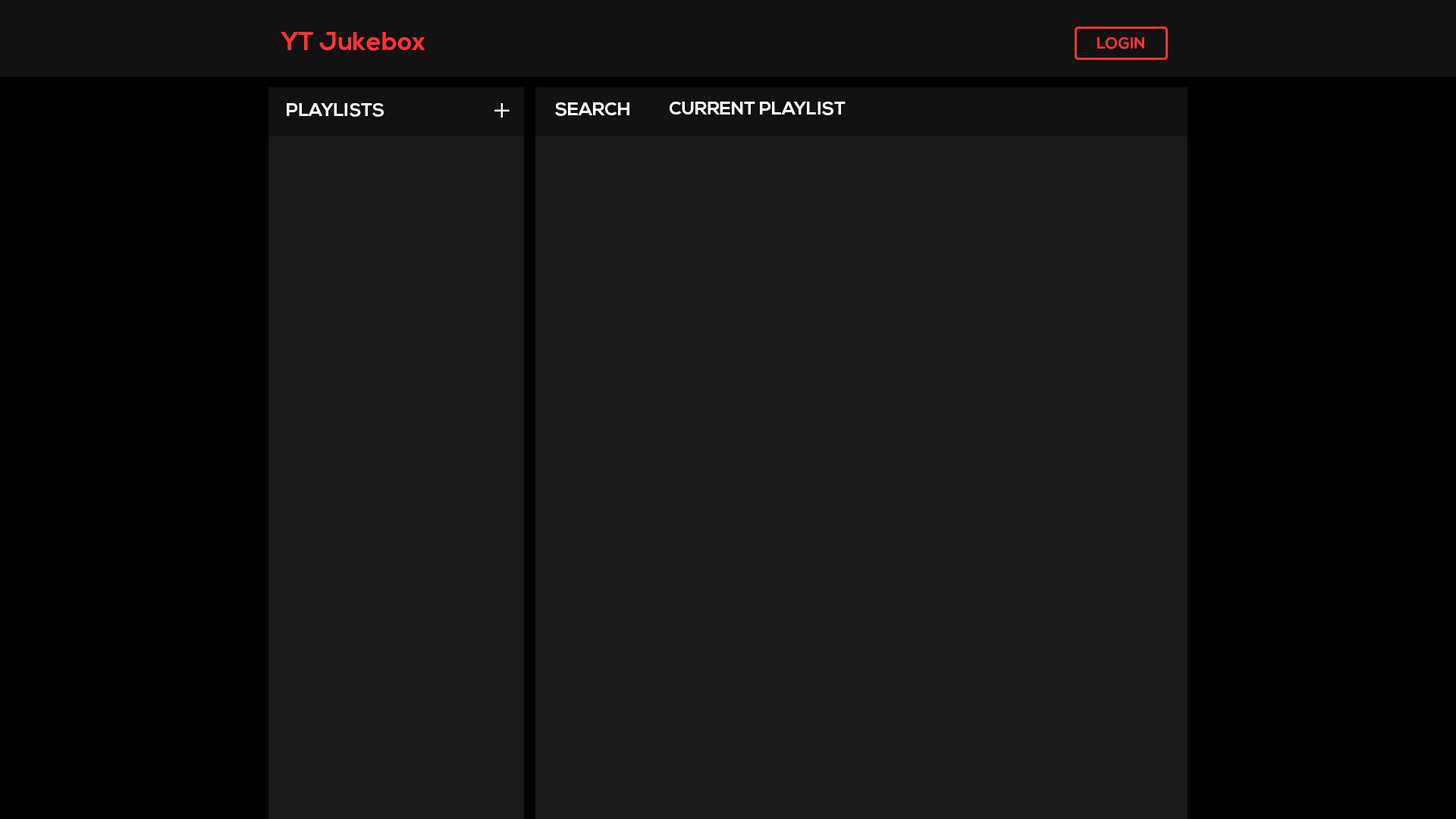
<style>
.page{position:relative;width:1456px;height:819px;background:#1a1a1a}
.page>*{position:absolute;margin:0}
.t1{font:25.8px "NexaBold";color:#ff3334}
.t2{font:16px "NexaBold";color:#ff3334}
.t3{font:18.2px "NexaBold";color:#ffffff}
.t4{font:36.4px "NexaLight";color:#ffffff}
</style>
<div class="page">
<p class="t1" style="left:281px;top:32px;width:144px;height:19px">YT Jukebox</p>
<p class="t2" style="left:1097px;top:37px;width:47px;height:12px">LOGIN</p>
<p class="t3" style="left:670px;top:102px;width:176px;height:13px">CURRENT PLAYLIST</p>
<p class="t3" style="left:287px;top:103px;width:97px;height:14px">PLAYLISTS</p>
<p class="t4" style="left:494px;top:103px;width:16px;height:15px">+</p>
<p class="t3" style="left:555px;top:102px;width:74px;height:14px">SEARCH</p>
</div>
